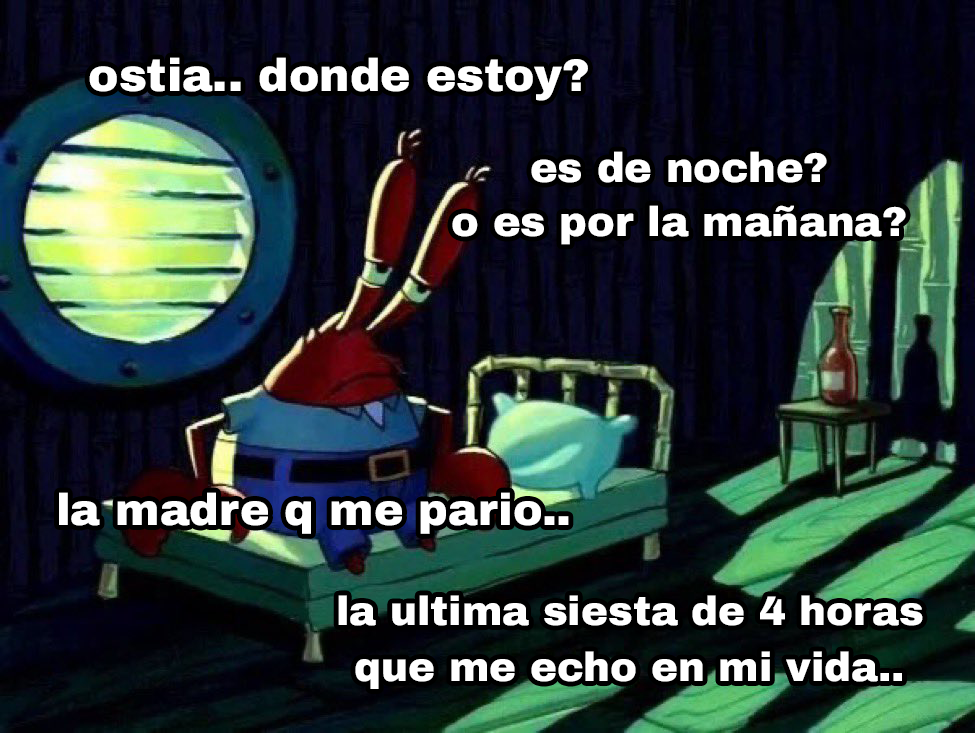
<style>
.page{position:relative;width:975px;height:733px}
.page>*{position:absolute;margin:0}
.t1{font:45.7px "ArchivoBlack-Regular";color:#ffffff}
.t2{font:41.5px "ArchivoBlack-Regular";color:#ffffff}
.t3{font:44.6px "ArchivoBlack-Regular";color:#ffffff}
.t4{font:40.5px "ArchivoBlack-Regular";color:#ffffff}
</style>
<div class="page">
<p class="t1" style="left:89px;top:57px;width:499px;height:44px">ostia.. donde estoy?</p>
<p class="t2" style="left:452px;top:151px;width:454px;height:94px;text-align:center">es de noche?<br>o es por la mañana?</p>
<p class="t3" style="left:59px;top:492px;width:510px;height:42px">la madre q me pario..</p>
<p class="t4" style="left:338px;top:595px;width:585px;height:94px;text-align:center">la ultima siesta de 4 horas<br>que me echo en mi vida..</p>
</div>
